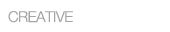
<style>
.page{position:relative;width:170px;height:32px;background:#ffffff}
.page>*{position:absolute;margin:0}
.t1{font:15px "HelveticaNeue-Light";letter-spacing:-0.03em;color:#a5a5a5}
.t2{font:15px "HelveticaNeue-Light";letter-spacing:-0.03em;color:#ffffff}
.t3{font:15px "HelveticaNeue-CondensedBlack";letter-spacing:-0.03em;color:#ffffff}
</style>
<div class="page">
<p class="t1" style="left:8px;top:11px;width:129px;height:12px">CREATIVE<span class="t2">ZEN </span><span class="t3">| CMS</span></p>
</div>
